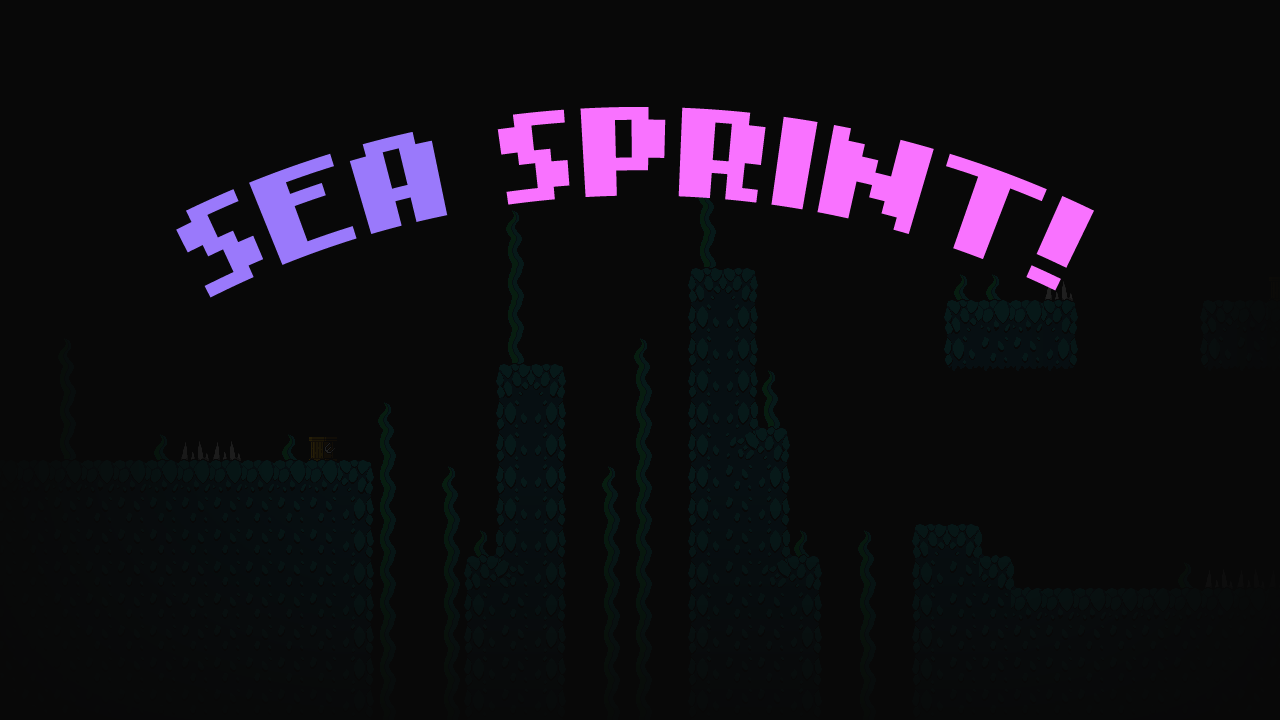
<style>
.page{position:relative;width:1280px;height:720px;background:#080808}
.page>*{position:absolute;margin:0}
.t1{font:101px "NokiaCellphoneFC-Small";color:#f972ff}
.t2{font:101px "NokiaCellphoneFC-Small";color:#9a79fb}
</style>
<div class="page">
<p class="t1" style="left:176px;top:107px;width:918px;height:191px;text-align:center"><span class="t2">SEA </span>SPRINT!</p>
</div>
